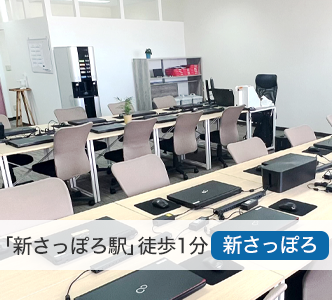
<style>
.page{position:relative;width:332px;height:300px}
.page>*{position:absolute;margin:0}
.t1{font:20px "HiraKakuStd-W5";letter-spacing:-0.05em;color:#333333}
.t2{font:20px "HiraKakuStd-W5";letter-spacing:-0.45em;color:#333333}
.t3{font:20px "HiraKakuStd-W5";letter-spacing:-0.05em;color:#ffffff}
</style>
<div class="page">
<p class="t1" style="left:7px;top:236px;width:201px;height:19px">「新さっぽろ駅<span class="t2">」</span>徒歩1分</p>
<p class="t3" style="left:223px;top:235px;width:93px;height:19px">新さっぽろ</p>
</div>
